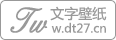
<style>
.page{position:relative;width:116px;height:40px;background:#ffffff}
.page>*{position:absolute;margin:0}
.t1{font:14px "MicrosoftYaHei";color:#999999}
.t2{font:36px "ElegantScript";color:#999999;font-weight:bold;scale:0.83 1}
.t3{font:12px "MicrosoftYaHei";color:#999999}
</style>
<div class="page">
<p class="t1" style="left:50px;top:6px;width:57px;height:15px">文字壁纸</p>
<p class="t2" style="left:10px;top:7px;width:38px;height:26px">Tw</p>
<p class="t3" style="left:51px;top:22px;width:55px;height:11px">w.dt27.cn</p>
</div>
